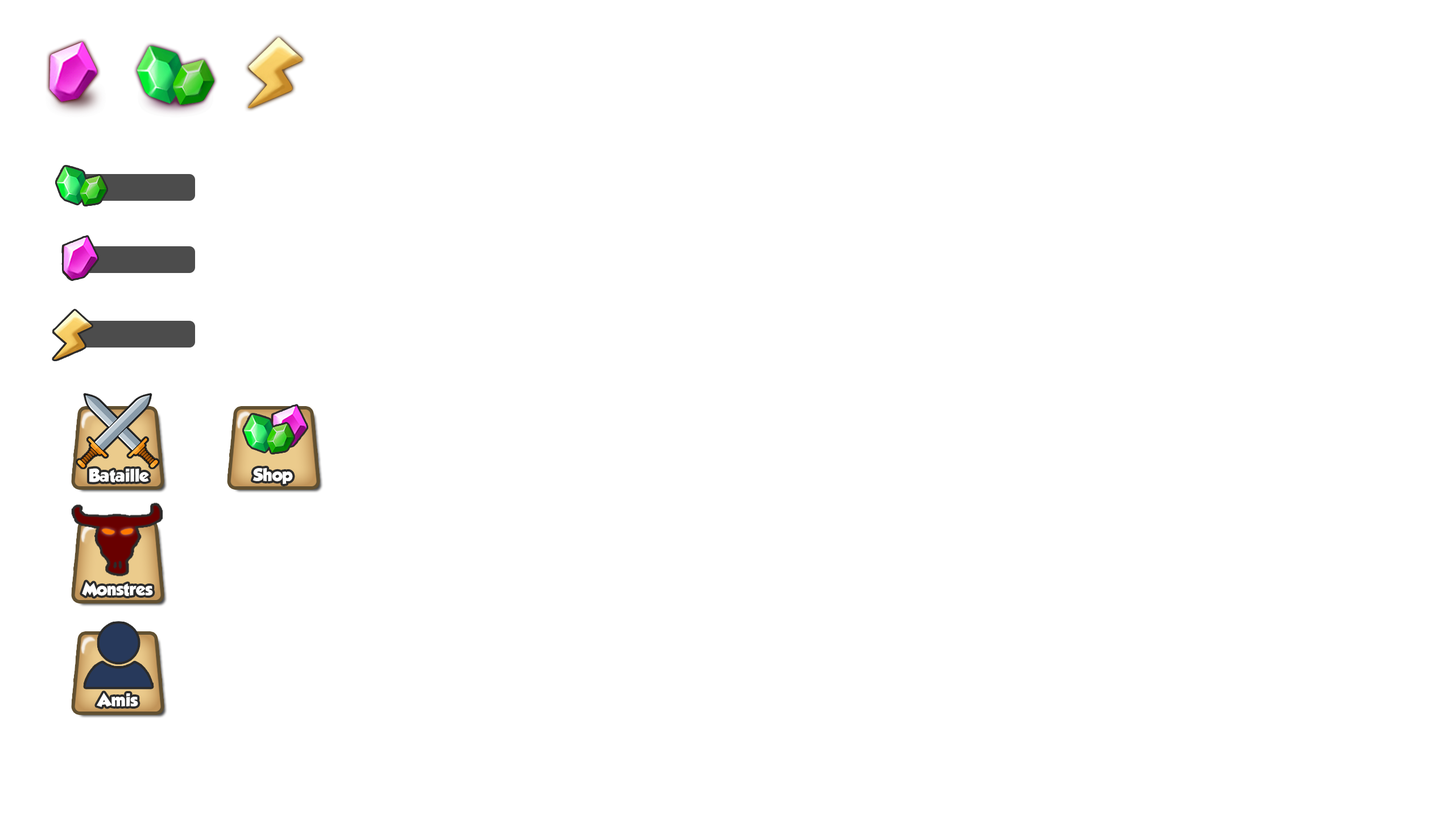
<style>
.page{position:relative;width:1456px;height:819px;background:#ffffff}
.page>*{position:absolute;margin:0}
.t1{font:16.1px "GROBOLD";color:#ffffff}
</style>
<div class="page">
<p class="t1" style="left:89px;top:468px;width:60px;height:14px">Bataille</p>
<p class="t1" style="left:253px;top:468px;width:40px;height:16px">Shop</p>
<p class="t1" style="left:82px;top:582px;width:71px;height:15px">Monstres</p>
<p class="t1" style="left:97px;top:693px;width:41px;height:14px">Amis</p>
</div>
